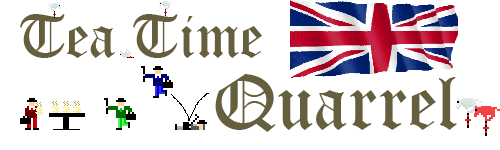
<style>
.page{position:relative;width:500px;height:150px;background:#ffffff}
.page>*{position:absolute;margin:0}
.t1{font:60px "OldEnglishTextMT";color:#655f3d}
.t2{font:75px "OldEnglishTextMT";color:#655f3d}
</style>
<div class="page">
<p class="t1" style="left:20px;top:14px;width:242px;height:44px">Tea Time</p>
<p class="t2" style="left:215px;top:74px;width:242px;height:58px">Quarrel</p>
</div>
